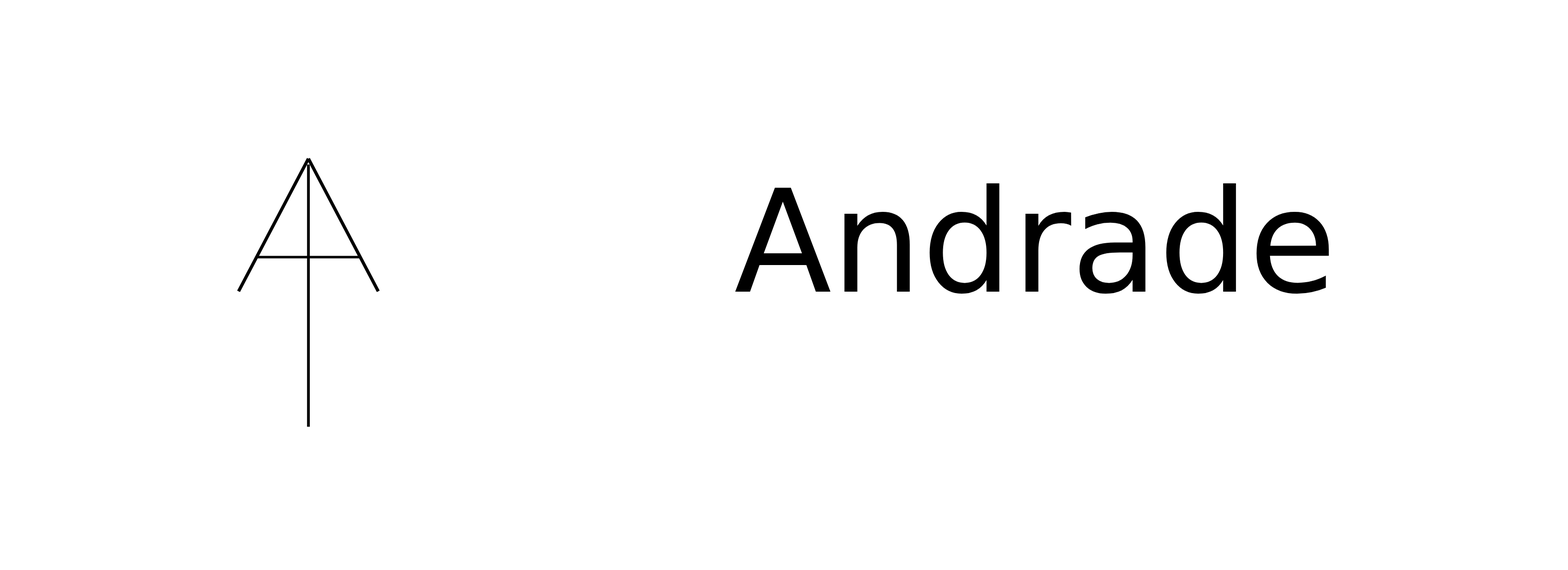
<style>
.page{position:relative;width:1568px;height:570px;background:#ffffff}
.page>*{position:absolute;margin:0}
.t1{font:142.5px "DejaVuSans";color:#000000}
</style>
<div class="page">
<p class="t1" style="left:735px;top:183px;width:594px;height:111px">Andrade</p>
</div>
